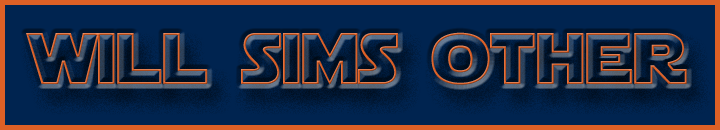
<style>
.page{position:relative;width:720px;height:130px;background:#002450}
.page>*{position:absolute;margin:0}
.t1{font:72.3px "StarJediHollow"}
</style>
<div class="page">
<p class="t1" style="left:26px;top:32px;width:661px;height:53px">will sims other</p>
</div>
